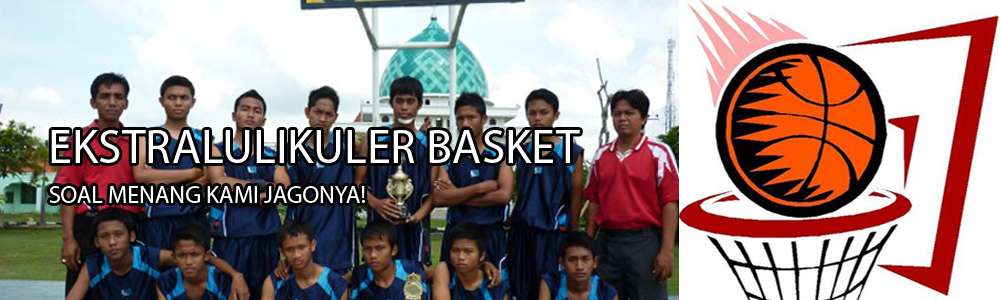
<style>
.page{position:relative;width:1000px;height:300px}
.page>*{position:absolute;margin:0}
.t1{font:48px "MyriadPro-Regular";color:#ffffff}
.t2{font:24px "MyriadPro-Regular";color:#ffffff}
</style>
<div class="page">
<p class="t1" style="left:51px;top:130px;width:529px;height:33px">EKSTRALULIKULER BASKET</p>
<p class="t2" style="left:49px;top:186px;width:316px;height:17px">SOAL MENANG KAMI JAGONYA!</p>
</div>
